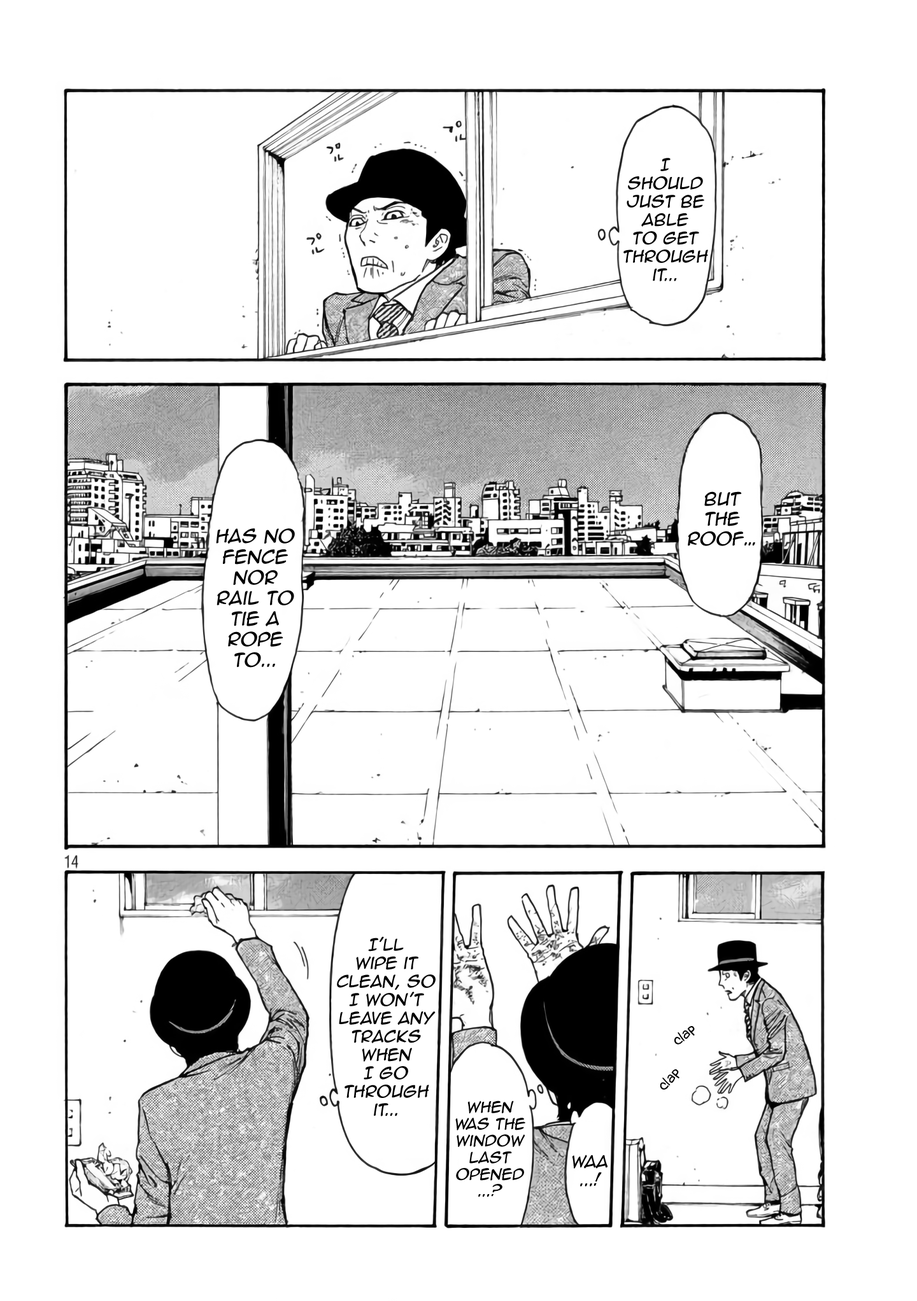
<style>
.page{position:relative;width:917px;height:1301px;background:#ffffff}
.page>*{position:absolute;margin:0}
.t1{font:15.3px "AnimeAce2.0BB";color:#000000;font-style:italic}
.t2{font:16.5px "AnimeAce2.0BB";color:#000000;font-style:italic}
.t3{font:17.2px "AnimeAce2.0BB";color:#000000;font-style:italic}
.t4{font:15.3px "Augie";color:#000000}
.t5{font:14px "AnimeAce2.0BB";color:#000000;font-style:italic}
</style>
<div class="page">
<p class="t1" style="left:623px;top:158px;width:85px;height:123px;text-align:center">I<br>should just be able <br>to get through it...</p>
<p class="t2" style="left:687px;top:491px;width:68px;height:55px;text-align:center">But the roof…</p>
<p class="t3" style="left:216px;top:528px;width:79px;height:140px;text-align:center">has no fence nor rail to tie a rope to...</p>
<p class="t1" style="left:337px;top:936px;width:98px;height:180px;text-align:center">I'll<br>wipe it clean, so I won’t leave any tracks when <br>I go through it...</p>
<p class="t4" style="left:674px;top:1026px;width:20px;height:18px;rotate:-37deg">clap</p>
<p class="t4" style="left:659px;top:1069px;width:20px;height:21px;rotate:-46deg">clap</p>
<p class="t5" style="left:455px;top:1101px;width:70px;height:96px;text-align:center">When was the window last opened<br>...?</p>
<p class="t1" style="left:572px;top:1155px;width:35px;height:31px;text-align:center">Waa<br>...!</p>
</div>
